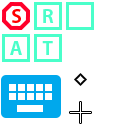
<style>
.page{position:relative;width:128px;height:128px;background:#ffffff}
.page>*{position:absolute;margin:0}
.t1{font:18px "AdobeGothicStd-Bold";color:#ff0000;scale:1.07 1}
.t2{font:18px "AdobeGothicStd-Bold";color:#4affca}
.t3{font:18px "AdobeGothicStd-Bold";color:#4affca;scale:1.07 1}
</style>
<div class="page">
<p class="t1" style="left:12px;top:9px;width:9px;height:14px">S</p>
<p class="t2" style="left:43px;top:9px;width:11px;height:14px">R</p>
<p class="t3" style="left:10px;top:41px;width:12px;height:14px">A</p>
<p class="t3" style="left:42px;top:41px;width:11px;height:14px">T</p>
</div>
